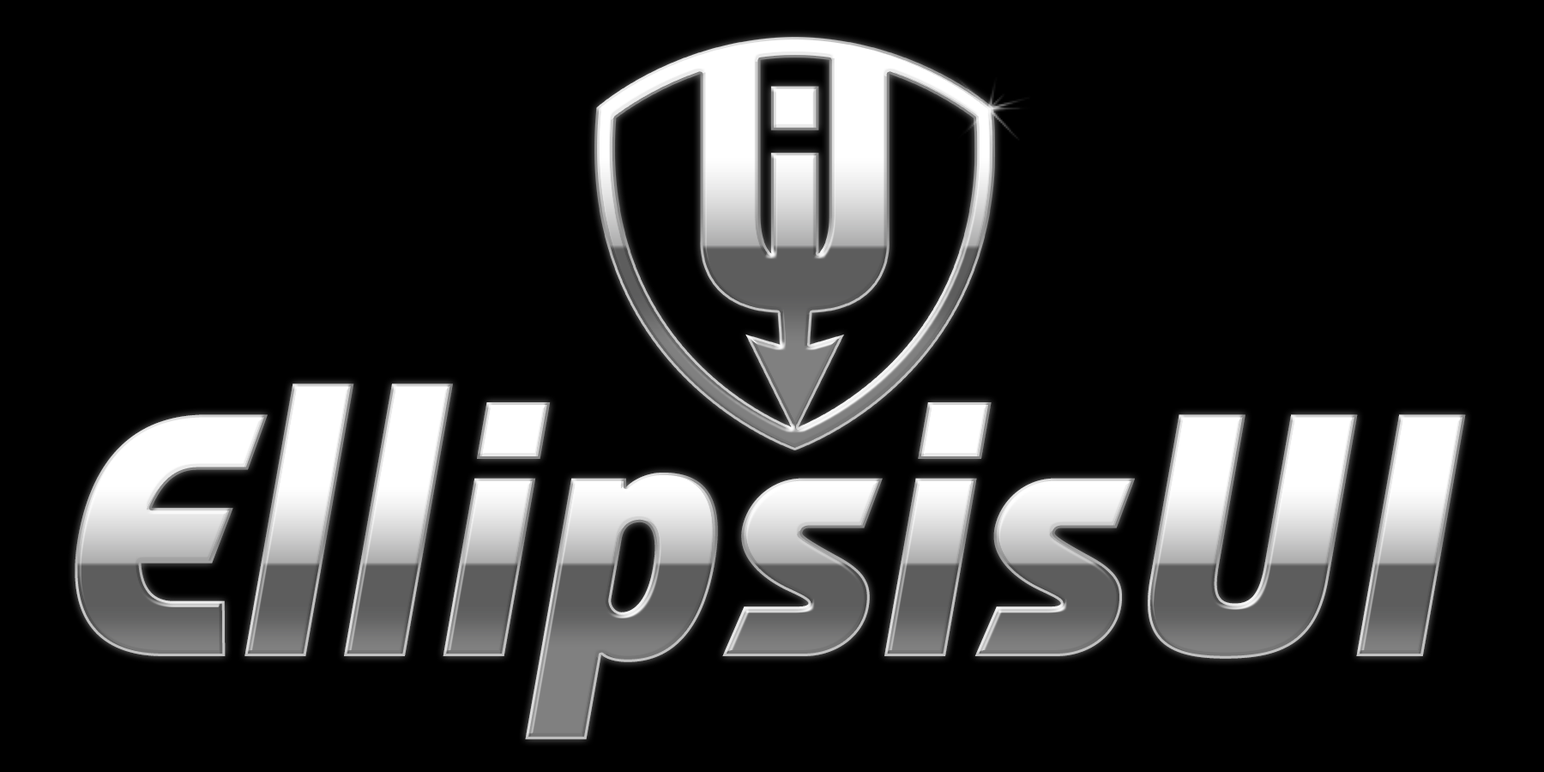
<style>
.page{position:relative;width:1544px;height:772px;background:#000000}
.page>*{position:absolute;margin:0}
.t1{font:386.1px "Casiopea-Ultra";letter-spacing:0.01em;font-style:italic}
</style>
<div class="page">
<p class="t1" style="left:75px;top:384px;width:1391px;height:356px">EllipsisUI</p>
</div>
